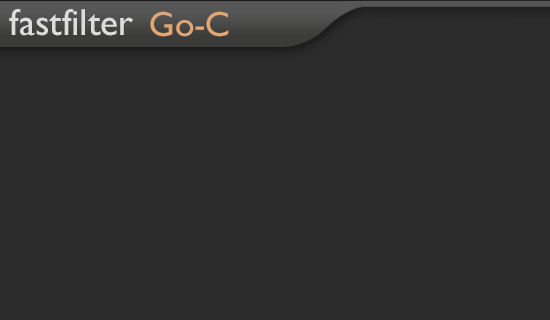
<style>
.page{position:relative;width:550px;height:320px;background:#2c2c2c}
.page>*{position:absolute;margin:0}
.t1{font:37.7px "GillSansMT";color:#dddddd}
.t2{font:35.1px "GillSansMT";color:#e0a676}
</style>
<div class="page">
<p class="t1" style="left:9px;top:9px;width:124px;height:27px">fastfilter</p>
<p class="t2" style="left:150px;top:11px;width:79px;height:26px">Go-C</p>
</div>
